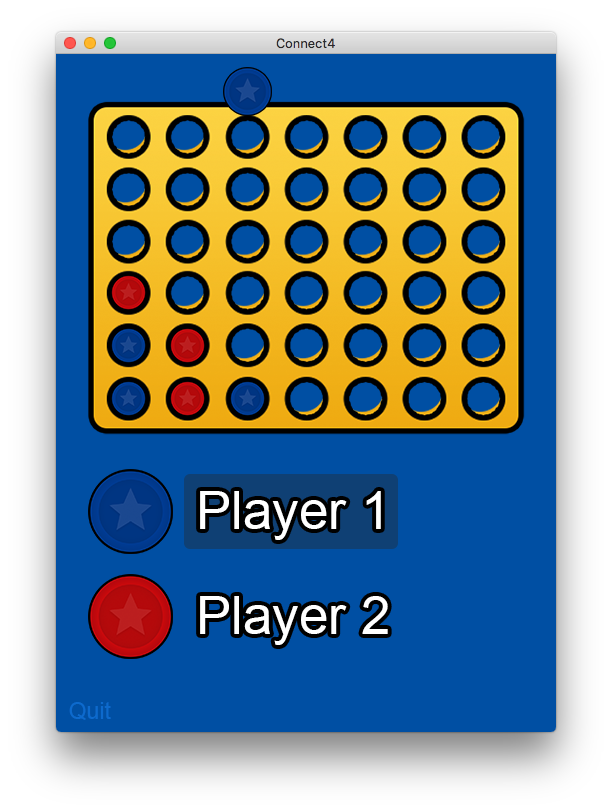
<style>
.page{position:relative;width:612px;height:812px;background:#004fa3}
.page>*{position:absolute;margin:0}
.t1{font:53px "ArialMT";color:#ffffff}
.t2{font:23px "ArialMT";color:#0d6acd}
</style>
<div class="page">
<p class="t1" style="left:200px;top:491px;width:181px;height:49px">Player 1</p>
<p class="t1" style="left:200px;top:596px;width:188px;height:49px">Player 2</p>
<p class="t2" style="left:69px;top:702px;width:42px;height:18px">Quit</p>
</div>
